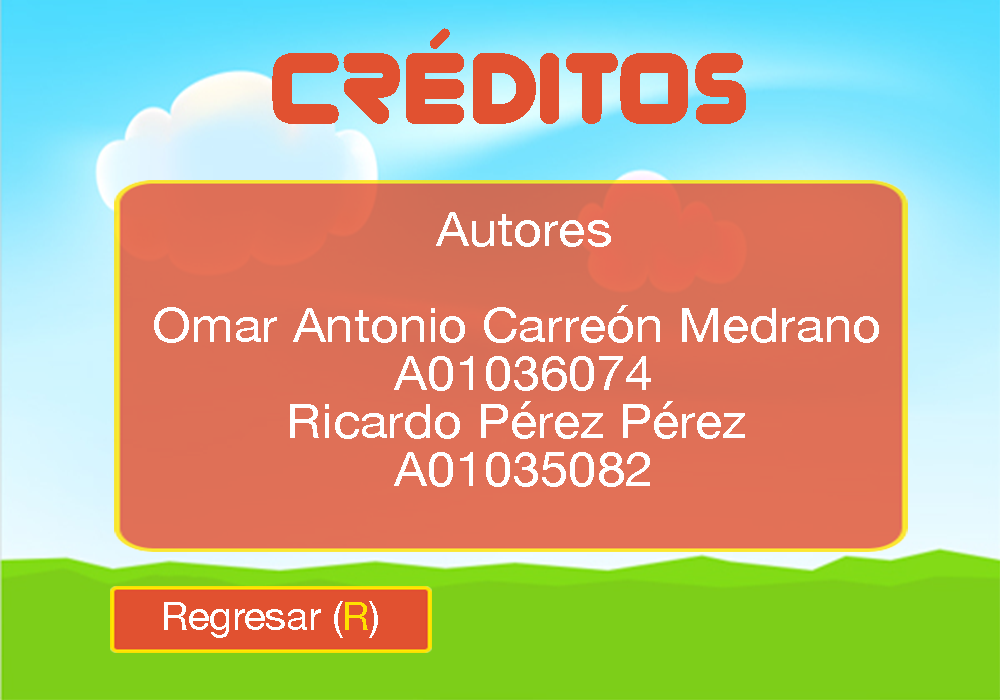
<style>
.page{position:relative;width:1000px;height:700px}
.page>*{position:absolute;margin:0}
.t1{font:100px "Zorque-Regular";color:#e15130}
.t2{font:48px/48px "HelveticaNeue";color:#ffffff;scale:1.06 1}
.t3{font:40px "HelveticaNeue";color:#ffffff}
.t4{font:40px "HelveticaNeue";color:#ffe100}
</style>
<div class="page">
<p class="t1" style="left:272px;top:28px;width:474px;height:96px">Créditos</p>
<p class="t2" style="left:154px;top:212px;width:725px;height:275px;text-align:center">Autores<br><br>Omar Antonio Carreón Medrano <br>A01036074<br>Ricardo Pérez Pérez <br>A01035082</p>
<p class="t3" style="left:164px;top:601px;width:214px;height:37px">Regresar (<span class="t4">R</span>)</p>
</div>
